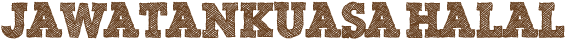
<style>
.page{position:relative;width:566px;height:40px;background:#ffffff}
.page>*{position:absolute;margin:0}
.t1{font:48px "ScribbleBoxDEMO";color:#684121}
</style>
<div class="page">
<p class="t1" style="left:1px;top:1px;width:564px;height:38px">Jawatankuasa HALAL</p>
</div>
